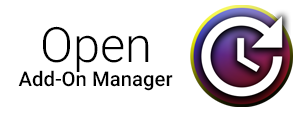
<style>
.page{position:relative;width:300px;height:114px;background:#ffffff}
.page>*{position:absolute;margin:0}
.t1{font:20.3px "Roboto-Medium";color:#000000}
.t2{font:48.7px "Roboto-Light";color:#000000}
</style>
<div class="page">
<p class="t1" style="left:18px;top:26px;width:155px;height:65px;text-align:center"><span class="t2">Open<br></span>Add-On Manager</p>
</div>
